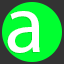
<style>
.page{position:relative;width:64px;height:64px;background:#00ff30}
.page>*{position:absolute;margin:0}
.t1{font:82px "MyriadPro-Regular";color:#ffffff}
</style>
<div class="page">
<p class="t1" style="left:7px;top:11px;width:33px;height:42px">a</p>
</div>
